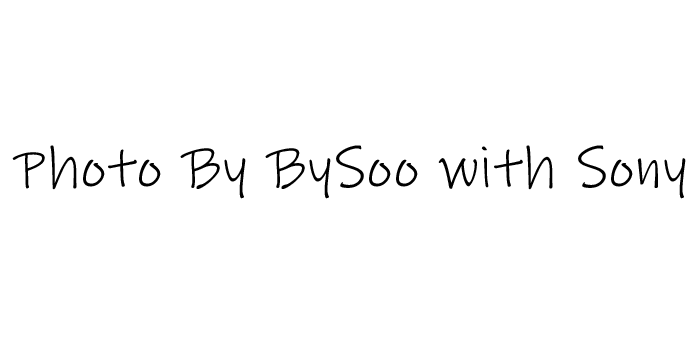
<style>
.page{position:relative;width:700px;height:350px;background:#ffffff}
.page>*{position:absolute;margin:0}
.t1{font:58.3px "InkFree";letter-spacing:0.02em;color:#000000}
</style>
<div class="page">
<p class="t1" style="left:12px;top:145px;width:674px;height:54px">Photo By BySoo with Sony</p>
</div>
